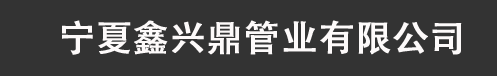
<style>
.page{position:relative;width:497px;height:76px;background:#333333}
.page>*{position:absolute;margin:0}
.t1{font:36.1px "AdobeHeitiStd-Regular";color:#fdfafa;font-weight:bold}
</style>
<div class="page">
<p class="t1" style="left:62px;top:20px;width:400px;height:35px">宁夏鑫兴鼎管业有限公司</p>
</div>
